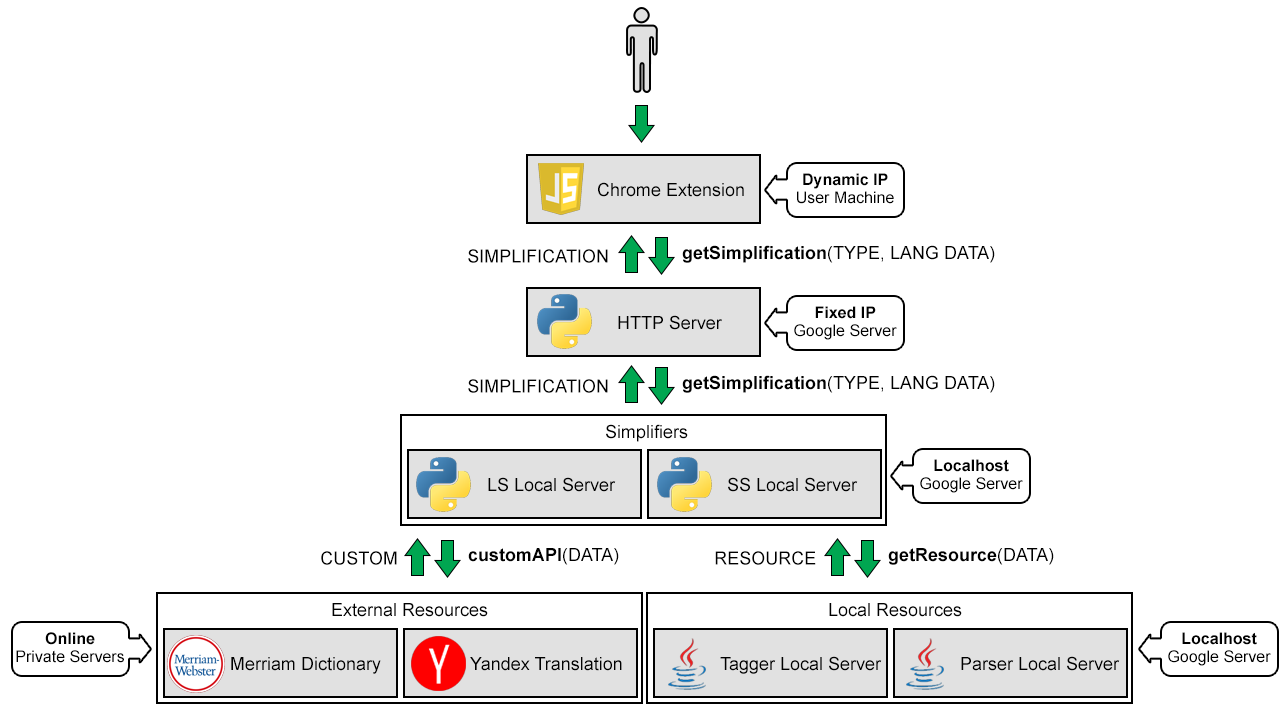
<style>
.page{position:relative;width:1288px;height:714px;background:#ffffff}
.page>*{position:absolute;margin:0}
.t1{font:16px/0.1px "ArialMT";color:#000000}
.t2{font:16px/0.1px "Arial-BoldMT";color:#000000}
.t3{font:18px "ArialMT";color:#000000}
.t4{font:18px "Arial-BoldMT";color:#000000}
</style>
<div class="page">
<p class="t1" style="left:797px;top:173px;width:97px;height:31px;text-align:center"><span class="t2">Dynamic IP<br></span>User Machine</p>
<p class="t3" style="left:598px;top:182px;width:146px;height:15px">Chrome Extension</p>
<p class="t4" style="left:682px;top:245px;width:313px;height:18px">getSimplification<span class="t3">(TYPE, LANG DATA)</span></p>
<p class="t3" style="left:468px;top:249px;width:140px;height:14px">SIMPLIFICATION</p>
<p class="t3" style="left:618px;top:315px;width:104px;height:15px">HTTP Server</p>
<p class="t1" style="left:794px;top:306px;width:103px;height:34px;text-align:center"><span class="t2">Fixed IP<br></span>Google Server</p>
<p class="t4" style="left:682px;top:375px;width:313px;height:18px">getSimplification<span class="t3">(TYPE, LANG DATA)</span></p>
<p class="t3" style="left:468px;top:379px;width:140px;height:14px">SIMPLIFICATION</p>
<p class="t3" style="left:606px;top:424px;width:82px;height:18px">Simplifiers</p>
<p class="t1" style="left:920px;top:459px;width:103px;height:34px;text-align:center"><span class="t2">Localhost<br></span>Google Server</p>
<p class="t3" style="left:488px;top:477px;width:128px;height:15px">LS Local Server</p>
<p class="t3" style="left:728px;top:477px;width:130px;height:15px">SS Local Server</p>
<p class="t3" style="left:321px;top:551px;width:76px;height:14px">CUSTOM</p>
<p class="t4" style="left:468px;top:548px;width:151px;height:17px">customAPI<span class="t3">(DATA)</span></p>
<p class="t3" style="left:715px;top:551px;width:101px;height:14px">RESOURCE</p>
<p class="t4" style="left:888px;top:548px;width:166px;height:17px">getResource<span class="t3">(DATA)</span></p>
<p class="t3" style="left:332px;top:603px;width:156px;height:14px">External Resources</p>
<p class="t3" style="left:829px;top:603px;width:133px;height:14px">Local Resources</p>
<p class="t1" style="left:16px;top:632px;width:108px;height:31px;text-align:center"><span class="t2">Online<br></span>Private Servers</p>
<p class="t1" style="left:1168px;top:632px;width:103px;height:34px;text-align:center"><span class="t2">Localhost<br></span>Google Server</p>
<p class="t3" style="left:231px;top:657px;width:150px;height:17px">Merriam Dictionary</p>
<p class="t3" style="left:470px;top:657px;width:152px;height:14px">Yandex Translation</p>
<p class="t3" style="left:720px;top:656px;width:162px;height:18px">Tagger Local Server</p>
<p class="t3" style="left:961px;top:656px;width:159px;height:15px">Parser Local Server</p>
</div>
